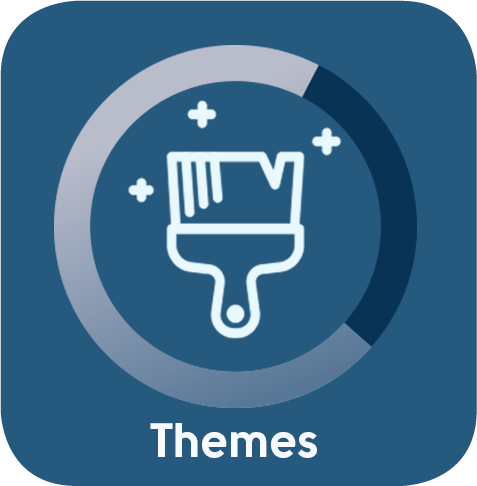
<style>
.page{position:relative;width:477px;height:486px;background:#25597e}
.page>*{position:absolute;margin:0}
.t1{font:48px "Solomon-Sans-Bold";color:#f7fbff}
</style>
<div class="page">
<p class="t1" style="left:150px;top:423px;width:167px;height:35px">Themes</p>
</div>
